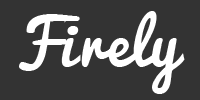
<style>
.page{position:relative;width:200px;height:100px;background:#333333}
.page>*{position:absolute;margin:0}
.t1{font:60px "Pacifico";letter-spacing:0.05em;color:#ffffff}
</style>
<div class="page">
<p class="t1" style="left:19px;top:11px;width:166px;height:83px">Firely</p>
</div>
